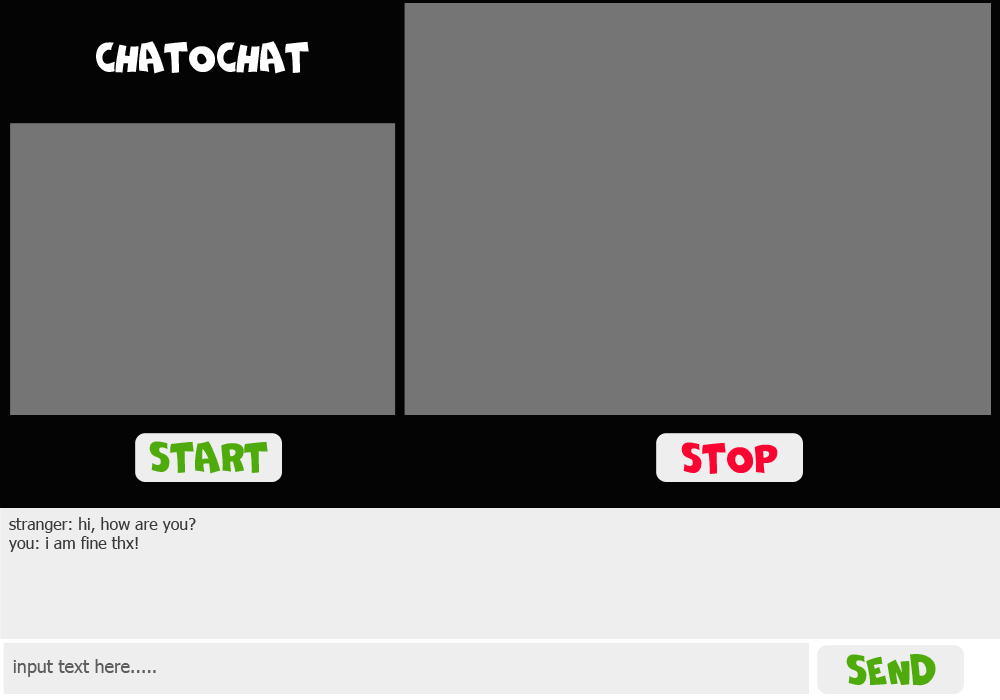
<style>
.page{position:relative;width:1000px;height:700px;background:#747574}
.page>*{position:absolute;margin:0}
.t1{font:40px "NeSkidComicaBDID120055769";color:#ffffff}
.t2{font:40px "NeSkidComicaBDID120055769";color:#4fab0b}
.t3{font:40px "NeSkidComicaBDID120055769";color:#fa0432}
.t4{font:16px "Tahoma";color:#3a3939}
.t5{font:18px "Tahoma";color:#5e5d5d}
</style>
<div class="page">
<p class="t1" style="left:96px;top:41px;width:213px;height:33px">chatochat</p>
<p class="t2" style="left:149px;top:441px;width:119px;height:33px">start</p>
<p class="t3" style="left:681px;top:442px;width:97px;height:32px">stop</p>
<p class="t4" style="left:9px;top:517px;width:187px;height:35px">stranger: hi, how are you?<br>you: i am fine thx!</p>
<p class="t2" style="left:846px;top:654px;width:90px;height:32px">send</p>
<p class="t5" style="left:13px;top:659px;width:143px;height:18px">input text here.....</p>
</div>
